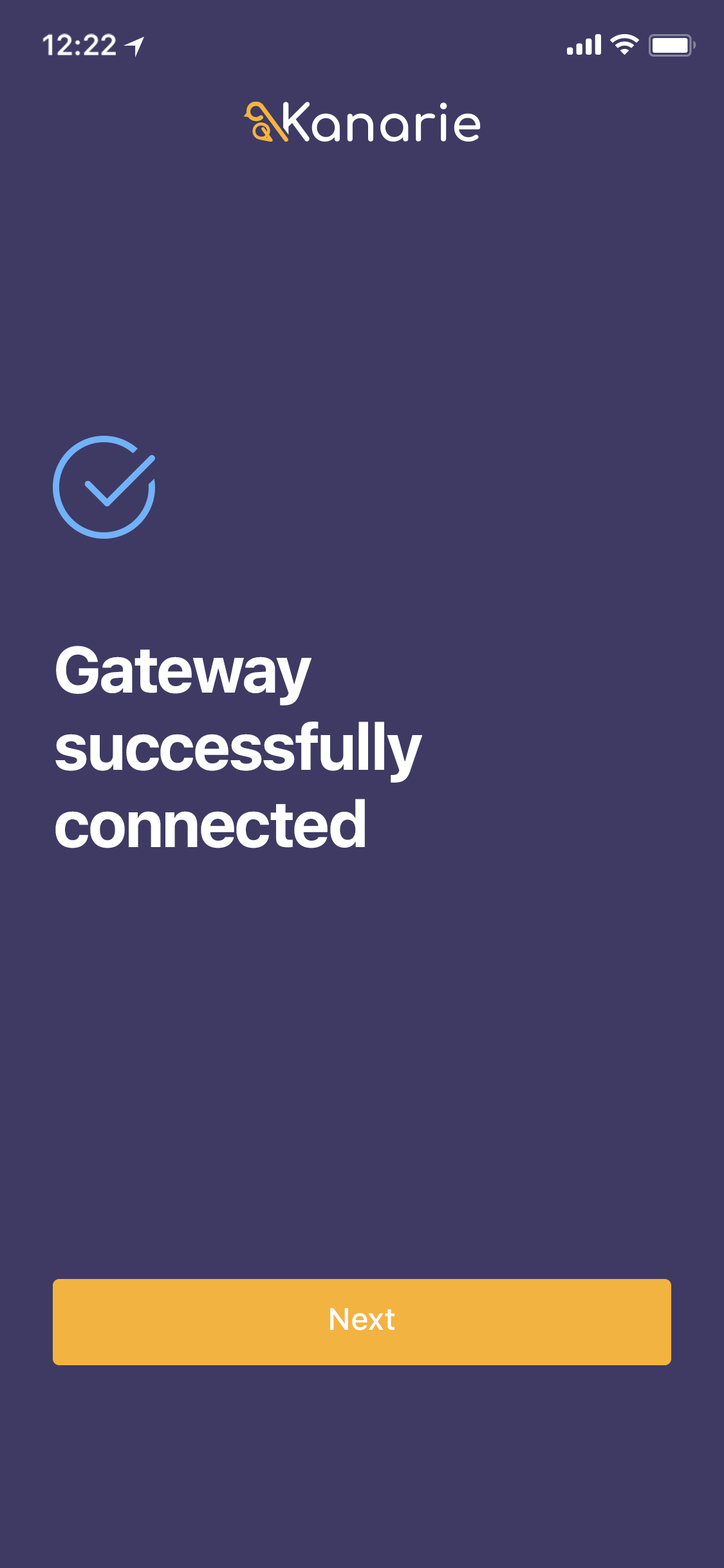
<style>
.page{position:relative;width:724px;height:1568px;background:#3e3a63}
.page>*{position:absolute;margin:0}
.t1{font:29px "SFProText-Semibold";letter-spacing:-0.02em;color:#ffffff}
.t2{font:64.4px "SFProText-Bold";letter-spacing:-0.05em;color:#ffffff}
.t3{font:30.9px "SFProText-Medium";letter-spacing:-0.01em;color:#ffffff}
</style>
<div class="page">
<p class="t1" style="left:42px;top:33px;width:74px;height:23px">12:22</p>
<p class="t2" style="left:55px;top:646px;width:367px;height:202px">Gateway successfully connected</p>
<p class="t3" style="left:330px;top:1308px;width:65px;height:22px">Next</p>
</div>
